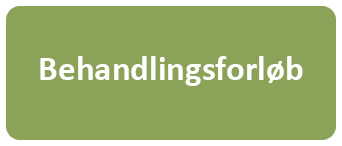
<style>
.page{position:relative;width:342px;height:146px;background:#8ba359}
.page>*{position:absolute;margin:0}
.t1{font:35px "Calibri-Bold";color:#ffffff}
</style>
<div class="page">
<p class="t1" style="left:40px;top:56px;width:263px;height:30px">Behandlingsforløb</p>
</div>
